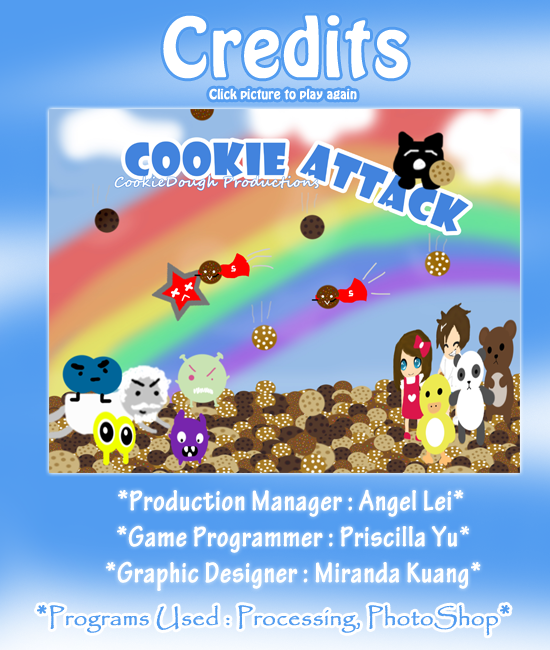
<style>
.page{position:relative;width:550px;height:650px}
.page>*{position:absolute;margin:0}
.t1{font:72px "HoboStd";color:#ffffff;font-weight:bold}
.t2{font:12px "HoboStd";color:#ffffff;font-weight:bold}
.t3{font:30px "TektonPro-BoldCond";color:#ffffff;font-weight:bold}
.t4{font:24px "Papyrus-Regular";color:#529cf0;font-weight:bold}
.t5{font:30px "TektonPro-BoldCond";color:#529cf0;font-weight:bold}
</style>
<div class="page">
<p class="t1" style="left:163px;top:15px;width:245px;height:64px">Credits</p>
<p class="t2" style="left:209px;top:88px;width:148px;height:12px">Click picture to play again</p>
<p class="t3" style="left:105px;top:489px;width:376px;height:102px;text-align:center">*Production Manager : Angel Lei*<br> *Game Programmer : Priscilla Yu*<br> *Graphic Designer : Miranda Kuang*</p>
<p class="t4" style="left:37px;top:605px;width:473px;height:31px"><span class="t5"><br>*</span>Programs Used : Processing, PhotoShop<span class="t5">*</span></p>
</div>
